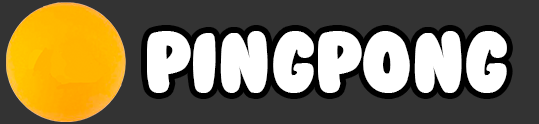
<style>
.page{position:relative;width:539px;height:124px;background:#333333}
.page>*{position:absolute;margin:0}
.t1{font:80px "BubbleGum";color:#ffffff}
</style>
<div class="page">
<p class="t1" style="left:147px;top:31px;width:360px;height:62px">PingPong</p>
</div>
